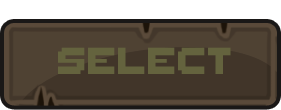
<style>
.page{position:relative;width:281px;height:110px;background:#413529}
.page>*{position:absolute;margin:0}
.t1{font:60px "ThaleahFat";color:#64633e}
</style>
<div class="page">
<p class="t1" style="left:58px;top:47px;width:173px;height:27px">SELECT</p>
</div>
